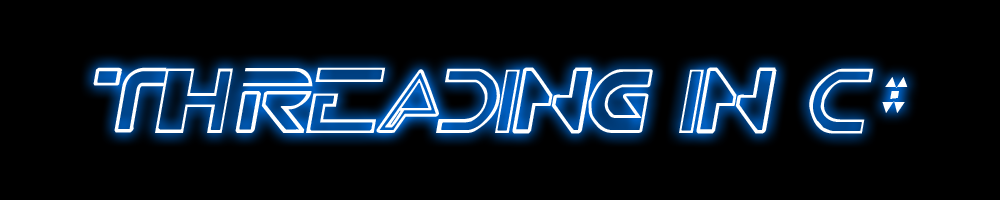
<style>
.page{position:relative;width:1000px;height:200px;background:#000000}
.page>*{position:absolute;margin:0}
.t1{font:72px "TRON";color:#ffffff;font-style:italic}
</style>
<div class="page">
<p class="t1" style="left:93px;top:67px;width:815px;height:67px">THREADING IN C#</p>
</div>
